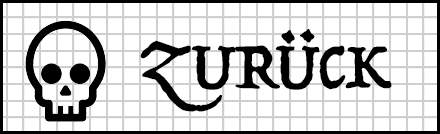
<style>
.page{position:relative;width:440px;height:134px;background:#ffffff}
.page>*{position:absolute;margin:0}
.t1{font:72px "Trattatello";letter-spacing:-0.025em;color:#000000}
</style>
<div class="page">
<p class="t1" style="left:140px;top:29px;width:252px;height:83px">ZURÜCK</p>
</div>
